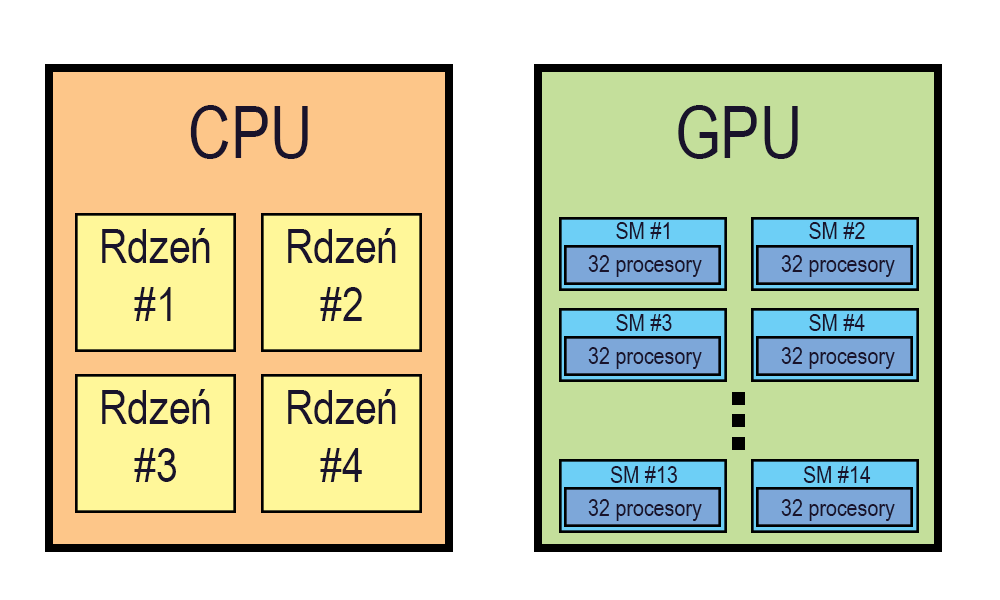
<style>
.page{position:relative;width:1000px;height:600px;background:#ffffff}
.page>*{position:absolute;margin:0}
.t1{font:72px "ArialNarrow";color:#19132b}
.t2{font:24px "ArialNarrow";color:#19132b}
.t3{font:48px "ArialNarrow";color:#19132b}
</style>
<div class="page">
<p class="t1" style="left:190px;top:105px;width:118px;height:54px">CPU</p>
<p class="t1" style="left:678px;top:105px;width:120px;height:54px">GPU</p>
<p class="t2" style="left:616px;top:222px;width:53px;height:17px">SM #1</p>
<p class="t2" style="left:809px;top:222px;width:56px;height:17px">SM #2</p>
<p class="t3" style="left:102px;top:228px;width:108px;height:93px;text-align:center">Rdzeń<br>#1</p>
<p class="t3" style="left:288px;top:228px;width:108px;height:93px;text-align:center">Rdzeń<br>#2</p>
<p class="t2" style="left:588px;top:255px;width:114px;height:22px">32 procesory</p>
<p class="t2" style="left:781px;top:255px;width:114px;height:22px">32 procesory</p>
<p class="t2" style="left:616px;top:314px;width:56px;height:17px">SM #3</p>
<p class="t2" style="left:809px;top:314px;width:56px;height:17px">SM #4</p>
<p class="t2" style="left:588px;top:347px;width:114px;height:22px">32 procesory</p>
<p class="t2" style="left:781px;top:347px;width:114px;height:22px">32 procesory</p>
<p class="t3" style="left:102px;top:389px;width:108px;height:93px;text-align:center">Rdzeń<br>#3</p>
<p class="t3" style="left:288px;top:389px;width:108px;height:93px;text-align:center">Rdzeń<br>#4</p>
<p class="t2" style="left:610px;top:466px;width:67px;height:17px">SM #13</p>
<p class="t2" style="left:803px;top:466px;width:68px;height:17px">SM #14</p>
<p class="t2" style="left:588px;top:499px;width:114px;height:22px">32 procesory</p>
<p class="t2" style="left:781px;top:499px;width:114px;height:22px">32 procesory</p>
</div>
